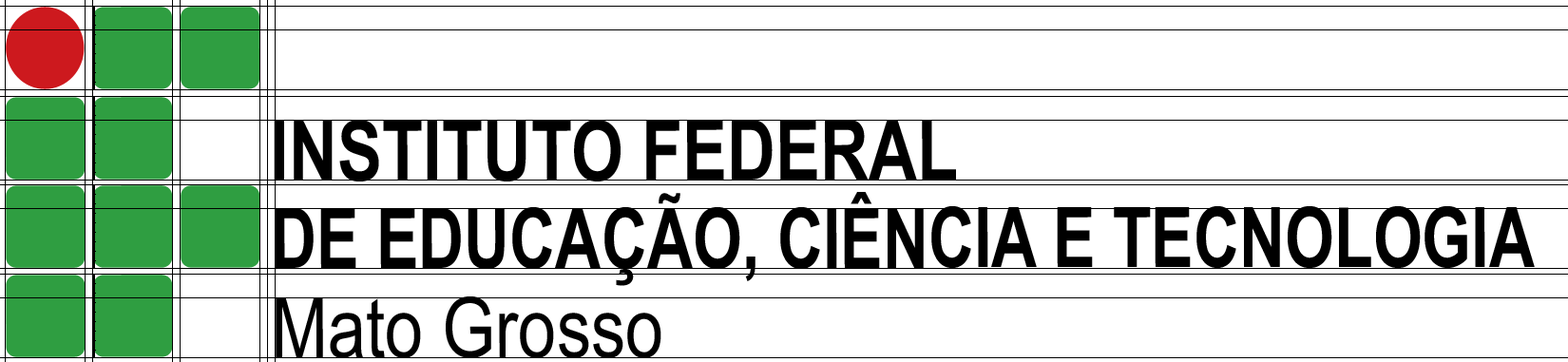
<style>
.page{position:relative;width:1568px;height:362px;background:#ffffff}
.page>*{position:absolute;margin:0}
.t1{font:83.6px "ArialNarrow-Bold";color:#000000}
.t2{font:83.6px "ArialNarrow-Bold";color:#000000;scale:0.92 1}
.t3{font:83.6px "ArialNarrow";color:#000000}
</style>
<div class="page">
<p class="t1" style="left:274px;top:120px;width:682px;height:62px">INSTITUTO FEDERAL</p>
<p class="t2" style="left:275px;top:192px;width:1260px;height:94px">DE EDUCAÇÃO, CIÊNCIA E TECNOLOGIA</p>
<p class="t3" style="left:276px;top:296px;width:385px;height:62px">Mato Grosso</p>
</div>
